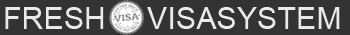
<style>
.page{position:relative;width:350px;height:35px;background:#333333}
.page>*{position:absolute;margin:0}
.t1{font:30px "ArialMT";letter-spacing:0.01em;color:#eaeaea}
</style>
<div class="page">
<p class="t1" style="left:5px;top:7px;width:99px;height:22px">FRESH</p>
<p class="t1" style="left:147px;top:7px;width:193px;height:22px">VISASYSTEM</p>
</div>
